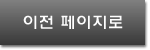
<style>
.page{position:relative;width:150px;height:50px}
.page>*{position:absolute;margin:0}
.t1{font:16px "HYwulM";color:#fefefe}
</style>
<div class="page">
<p class="t1" style="left:23px;top:15px;width:100px;height:14px">이전 페이지로</p>
</div>
